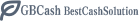
<style>
.page{position:relative;width:139px;height:21px;background:#ffffff}
.page>*{position:absolute;margin:0}
.t1{font:14px "FZQKBYSJW--GB1-0";color:#566374}
.t2{font:12px "FZQKBYSJW--GB1-0";color:#566374}
</style>
<div class="page">
<p class="t1" style="left:20px;top:5px;width:41px;height:11px">GBCash</p>
<p class="t2" style="left:64px;top:6px;width:75px;height:10px">BestCashSolution</p>
</div>
